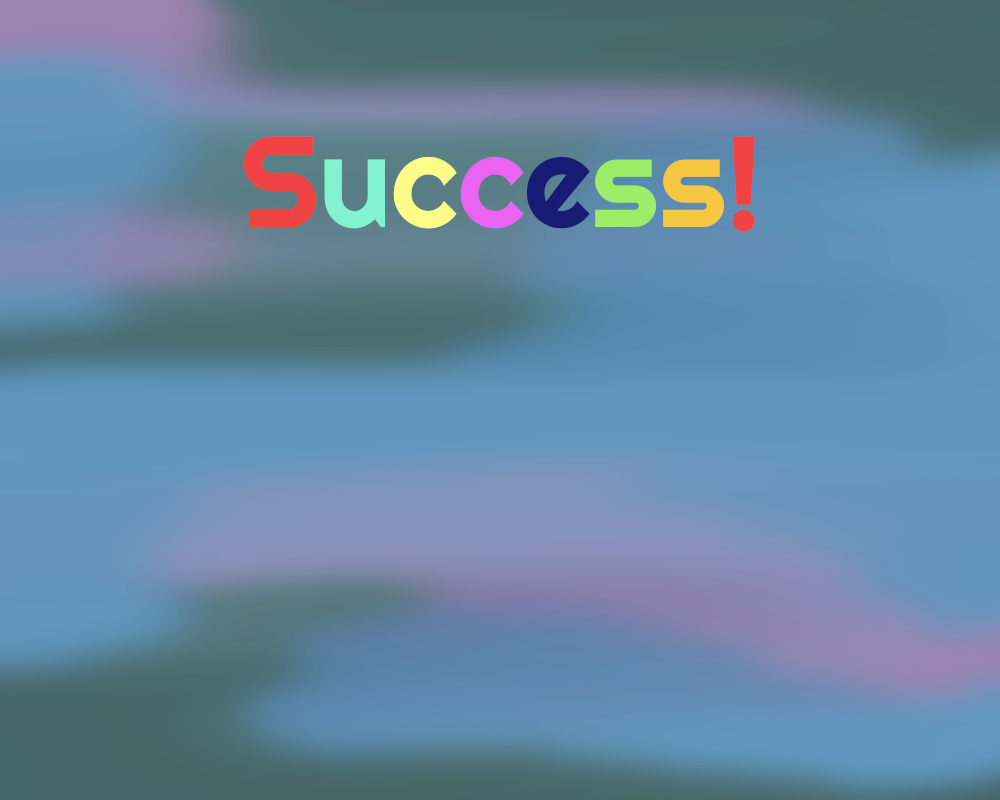
<style>
.page{position:relative;width:1000px;height:800px}
.page>*{position:absolute;margin:0}
.t1{font:128.8px "Righteous-Regular";color:#e04646}
.t2{font:128.8px "Righteous-Regular";color:#76e2b5}
.t3{font:128.8px "Righteous-Regular";color:#fff77b}
.t4{font:128.8px "Righteous-Regular";color:#d65fe4}
.t5{font:128.8px "Righteous-Regular";color:#1d216b}
.t6{font:128.8px "Righteous-Regular";color:#8cd763}
.t7{font:128.8px "Righteous-Regular";color:#eaad44}
</style>
<div class="page">
<p class="t1" style="left:244px;top:136px;width:511px;height:96px">S<span class="t2">u</span><span class="t3">c</span><span class="t4">c</span><span class="t5">e</span><span class="t6">s</span><span class="t7">s</span>!</p>
</div>
